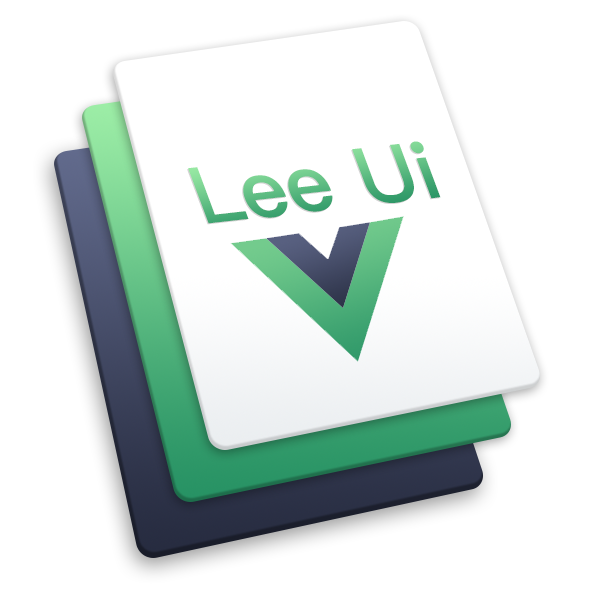
<style>
.page{position:relative;width:600px;height:600px;background:#ffffff}
.page>*{position:absolute;margin:0}
.t1{font:82.4px "PingFang-SC-Heavy"}
</style>
<div class="page">
<p class="t1" style="left:187px;top:142px;width:253px;height:83px;rotate:-6deg">Lee Ui</p>
<p class="t1" style="left:188px;top:141px;width:253px;height:83px;rotate:-6deg">Lee Ui</p>
</div>
